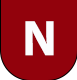
<style>
.page{position:relative;width:77px;height:80px;background:#92020c}
.page>*{position:absolute;margin:0}
.t1{font:50px "MyriadPro-Bold";color:#fcfcfe}
</style>
<div class="page">
<p class="t1" style="left:25px;top:21px;width:29px;height:35px">N</p>
</div>
